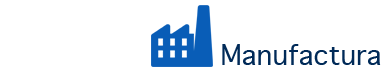
<style>
.page{position:relative;width:390px;height:73px;background:#ffffff}
.page>*{position:absolute;margin:0}
.t1{font:27px "Geneva";color:#002a58}
</style>
<div class="page">
<p class="t1" style="left:222px;top:44px;width:159px;height:21px">Manufactura</p>
</div>
